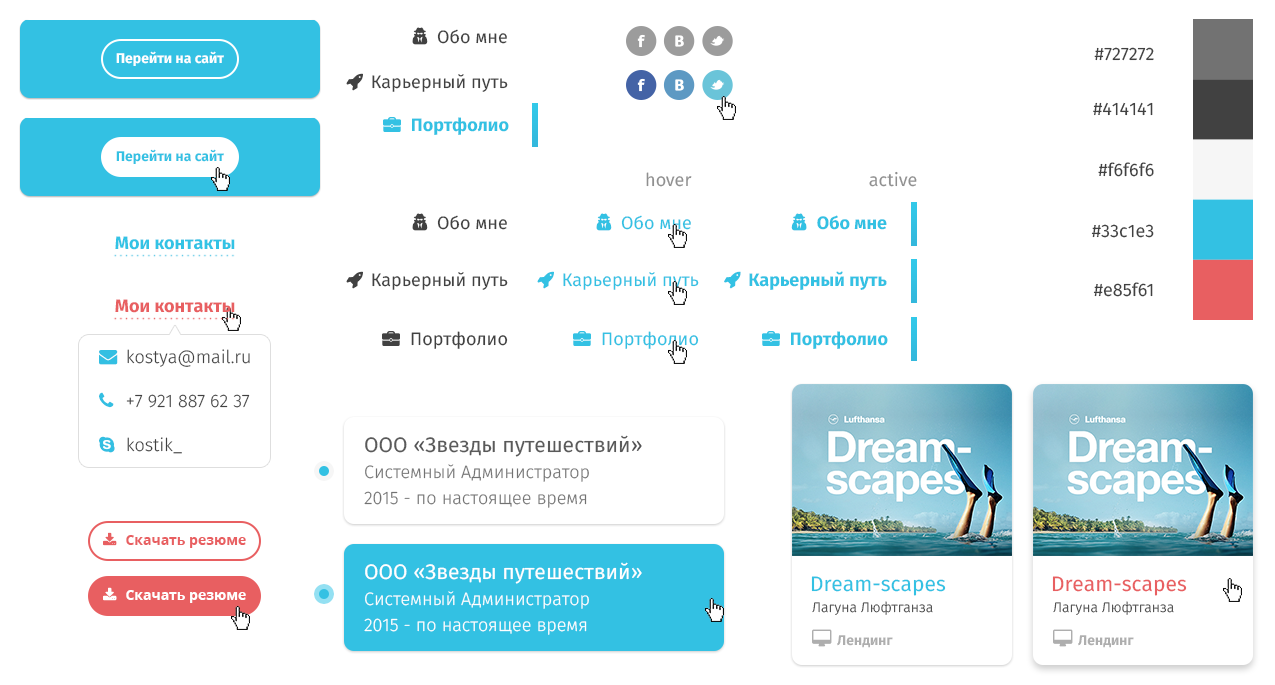
<style>
.page{position:relative;width:1275px;height:685px;background:#ffffff}
.page>*{position:absolute;margin:0}
.t1{font:14px "FiraSans-Bold";color:#ffffff}
.t2{font:18px "FiraSans-Regular";color:#414141}
.t3{font:18px "FiraSans-Bold";color:#33c1e3}
.t4{font:14px "FiraSans-Bold";color:#33c1e3}
.t5{font:18px "FiraSans-Regular";color:#909090}
.t6{font:18px "FiraSans-Bold";color:#32c3e5}
.t7{font:18px "FiraSans-Bold";color:#e85f61}
.t8{font:18px "FiraSans-Regular";color:#33c1e3}
.t9{font:18px "FiraSans-Light";color:#414141}
.t10{font:18px/26px "FiraSans-Light";color:#727272}
.t11{font:21px/26px "FiraSans-Regular";color:#5a5a5a}
.t12{font:21px/26px "FiraSans-Regular";color:#515153}
.t13{font:14px "OpenSans-Bold";color:#e85f61}
.t14{font:18px/26px "FiraSans-Light";color:#ffffff}
.t15{font:21px/26px "FiraSans-Regular";color:#ffffff}
.t16{font:21px "FiraSans-Regular";color:#33c1e3}
.t17{font:21px "FiraSans-Regular";color:#e85f61}
.t18{font:14px "OpenSans-Bold";color:#ffffff}
.t19{font:14px "FiraSans-Light";color:#414141}
</style>
<div class="page">
<p class="t1" style="left:116px;top:51px;width:108px;height:15px">Перейти на сайт</p>
<p class="t2" style="left:1094px;top:47px;width:60px;height:14px">#727272</p>
<p class="t2" style="left:1093px;top:102px;width:60px;height:14px">#414141</p>
<p class="t3" style="left:412px;top:117px;width:97px;height:18px">Портфолио</p>
<p class="t4" style="left:116px;top:149px;width:108px;height:15px">Перейти на сайт</p>
<p class="t5" style="left:646px;top:172px;width:46px;height:15px">hover</p>
<p class="t5" style="left:869px;top:171px;width:48px;height:16px">active</p>
<p class="t2" style="left:1098px;top:162px;width:56px;height:15px">#f6f6f6</p>
<p class="t2" style="left:1091px;top:224px;width:63px;height:14px">#33c1e3</p>
<p class="t6" style="left:115px;top:236px;width:120px;height:14px">Мои контакты</p>
<p class="t2" style="left:1093px;top:282px;width:60px;height:15px">#e85f61</p>
<p class="t7" style="left:115px;top:299px;width:120px;height:14px">Мои контакты</p>
<p class="t2" style="left:411px;top:331px;width:97px;height:18px">Портфолио</p>
<p class="t8" style="left:602px;top:331px;width:97px;height:18px">Портфолио</p>
<p class="t3" style="left:791px;top:331px;width:97px;height:18px">Портфолио</p>
<p class="t9" style="left:127px;top:349px;width:123px;height:18px">kostya@mail.ru</p>
<p class="t9" style="left:126px;top:394px;width:124px;height:14px">+7 921 887 62 37</p>
<p class="t9" style="left:127px;top:437px;width:55px;height:17px">kostik_</p>
<p class="t10" style="left:364px;top:435px;width:278px;height:73px"><span class="t11">ООО </span><span class="t12">«</span><span class="t11">Звезды путешествий</span><span class="t12">»<br></span>Системный Администратор<br>2015 - по настоящее время</p>
<p class="t13" style="left:126px;top:535px;width:120px;height:13px">Скачать резюме</p>
<p class="t14" style="left:364px;top:562px;width:278px;height:73px"><span class="t15">ООО «Звезды путешествий»<br></span>Системный Администратор<br>2015 - по настоящее время</p>
<p class="t16" style="left:811px;top:576px;width:135px;height:20px">Dream-scapes</p>
<p class="t17" style="left:1052px;top:576px;width:135px;height:20px">Dream-scapes</p>
<p class="t18" style="left:126px;top:590px;width:120px;height:13px">Скачать резюме</p>
<p class="t19" style="left:812px;top:601px;width:121px;height:14px">Лагуна Люфтганза</p>
<p class="t19" style="left:1053px;top:601px;width:121px;height:14px">Лагуна Люфтганза</p>
</div>
